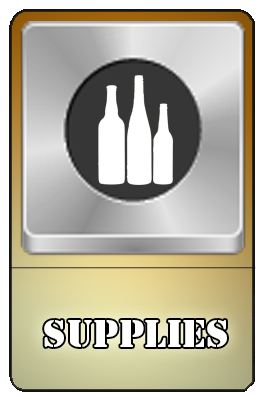
<style>
.page{position:relative;width:263px;height:402px}
.page>*{position:absolute;margin:0}
.t1{font:36px "StencilStd";color:#ffffff}
</style>
<div class="page">
<p class="t1" style="left:44px;top:320px;width:183px;height:27px">Supplies</p>
</div>
